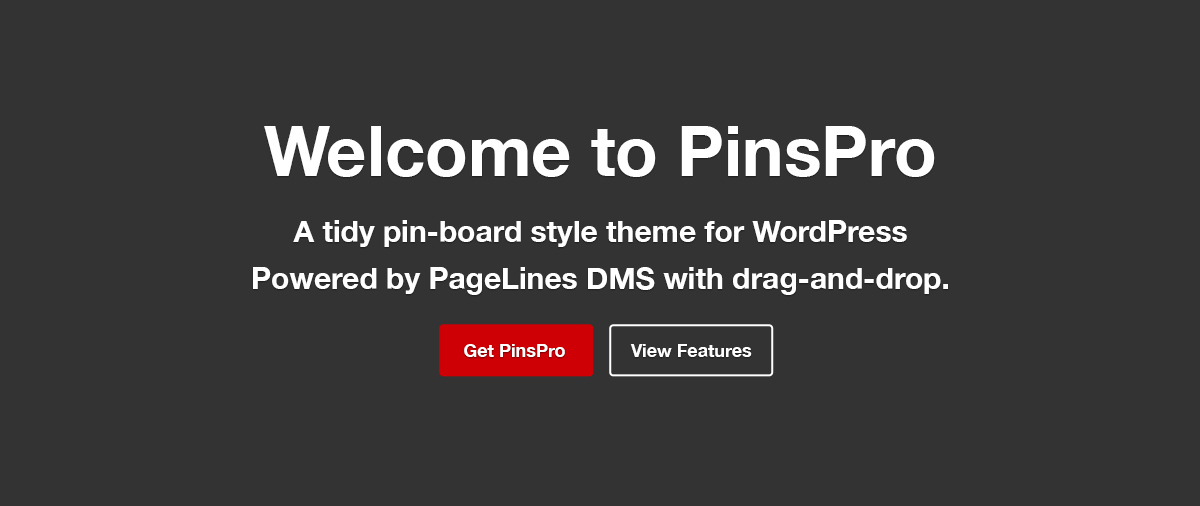
<style>
.page{position:relative;width:1200px;height:506px;background:#333333}
.page>*{position:absolute;margin:0}
.t1{font:70.1px "HelveticaNeue-Bold";color:#ffffff}
.t2{font:30px/47px "HelveticaNeue-Bold";color:#ffffff}
.t3{font:18px "HelveticaNeue-Bold";color:#ffffff}
</style>
<div class="page">
<p class="t1" style="left:264px;top:126px;width:671px;height:51px">Welcome to PinsPro</p>
<p class="t2" style="left:253px;top:220px;width:695px;height:75px;text-align:center">A tidy pin-board style theme for WordPress <br>Powered by PageLines DMS with drag-and-drop.</p>
<p class="t3" style="left:464px;top:344px;width:101px;height:13px">Get PinsPro</p>
<p class="t3" style="left:630px;top:344px;width:122px;height:13px">View Features</p>
</div>
